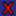
<style>
.page{position:relative;width:16px;height:16px;background:#2a2c83}
.page>*{position:absolute;margin:0}
.t1{font:15px "Verdana";color:#ff0000}
</style>
<div class="page">
<p class="t1" style="left:3px;top:2px;width:10px;height:12px">X</p>
</div>
